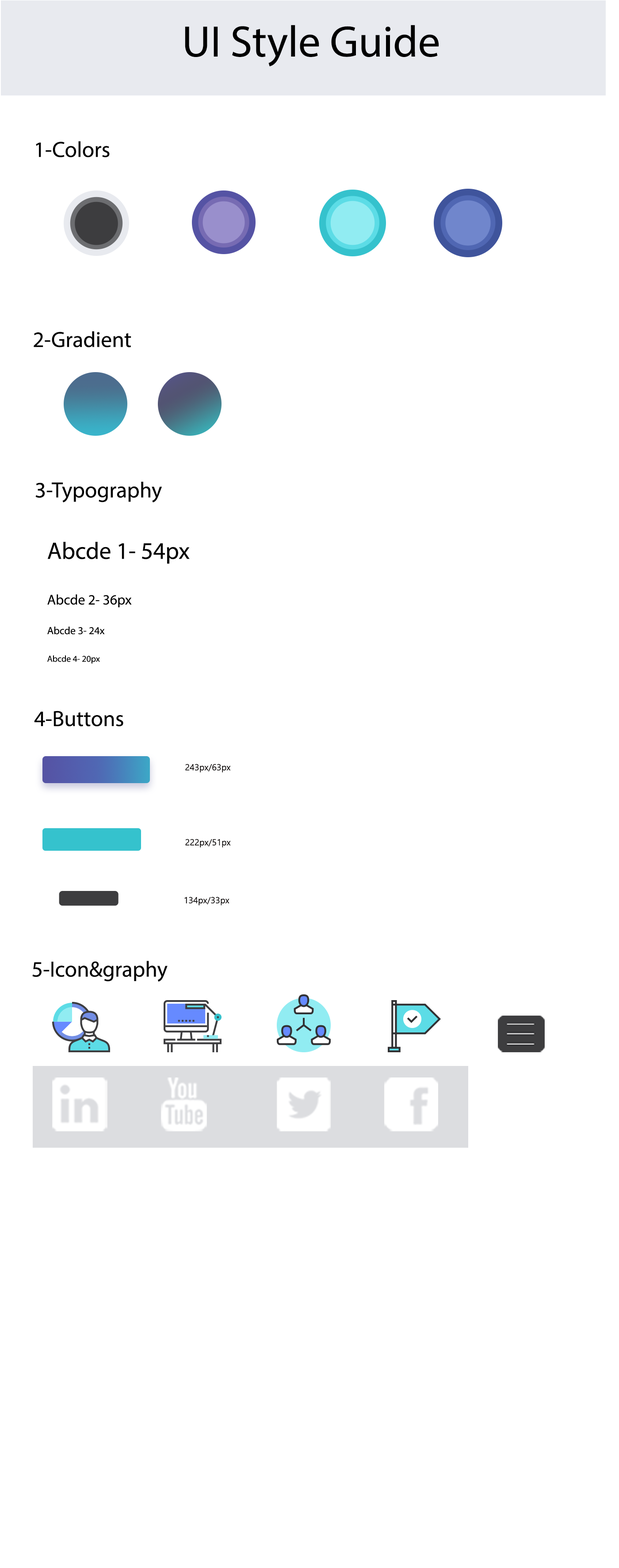
<style>
.page{position:relative;width:619px;height:1568px;background:#ffffff}
.page>*{position:absolute;margin:0}
.t1{font:44.2px "MyriadPro-Regular";color:#000000}
.t2{font:22.1px "MyriadPro-Regular";color:#000000}
.t3{font:23.9px "MyriadPro-Regular";color:#000000}
.t4{font:14.1px "MyriadPro-Regular";color:#000000}
.t5{font:10.6px "MyriadPro-Regular";color:#000000}
.t6{font:8.8px "MyriadPro-Regular";color:#000000}
.t7{font:8.8px "SegoeUISymbol";color:#040000}
</style>
<div class="page">
<p class="t1" style="left:185px;top:25px;width:254px;height:41px">UI Style Guide</p>
<p class="t2" style="left:36px;top:141px;width:74px;height:16px">1-Colors</p>
<p class="t2" style="left:34px;top:331px;width:97px;height:16px">2-Gradient</p>
<p class="t2" style="left:35px;top:482px;width:127px;height:20px">3-Typography</p>
<p class="t3" style="left:47px;top:542px;width:143px;height:122px">Abcde 1- 54px<br><br><span class="t4">Abcde 2- 36px<br><br></span><span class="t5">Abcde 3- 24x<br><br></span><span class="t6">Abcde 4- 20px</span></p>
<p class="t2" style="left:34px;top:711px;width:89px;height:16px">4-Buttons</p>
<p class="t7" style="left:185px;top:764px;width:46px;height:9px">243px/63px</p>
<p class="t7" style="left:185px;top:839px;width:46px;height:9px">222px/51px</p>
<p class="t7" style="left:184px;top:897px;width:45px;height:9px">134px/33px</p>
<p class="t2" style="left:32px;top:961px;width:135px;height:21px">5-Icon&amp;graphy</p>
</div>
